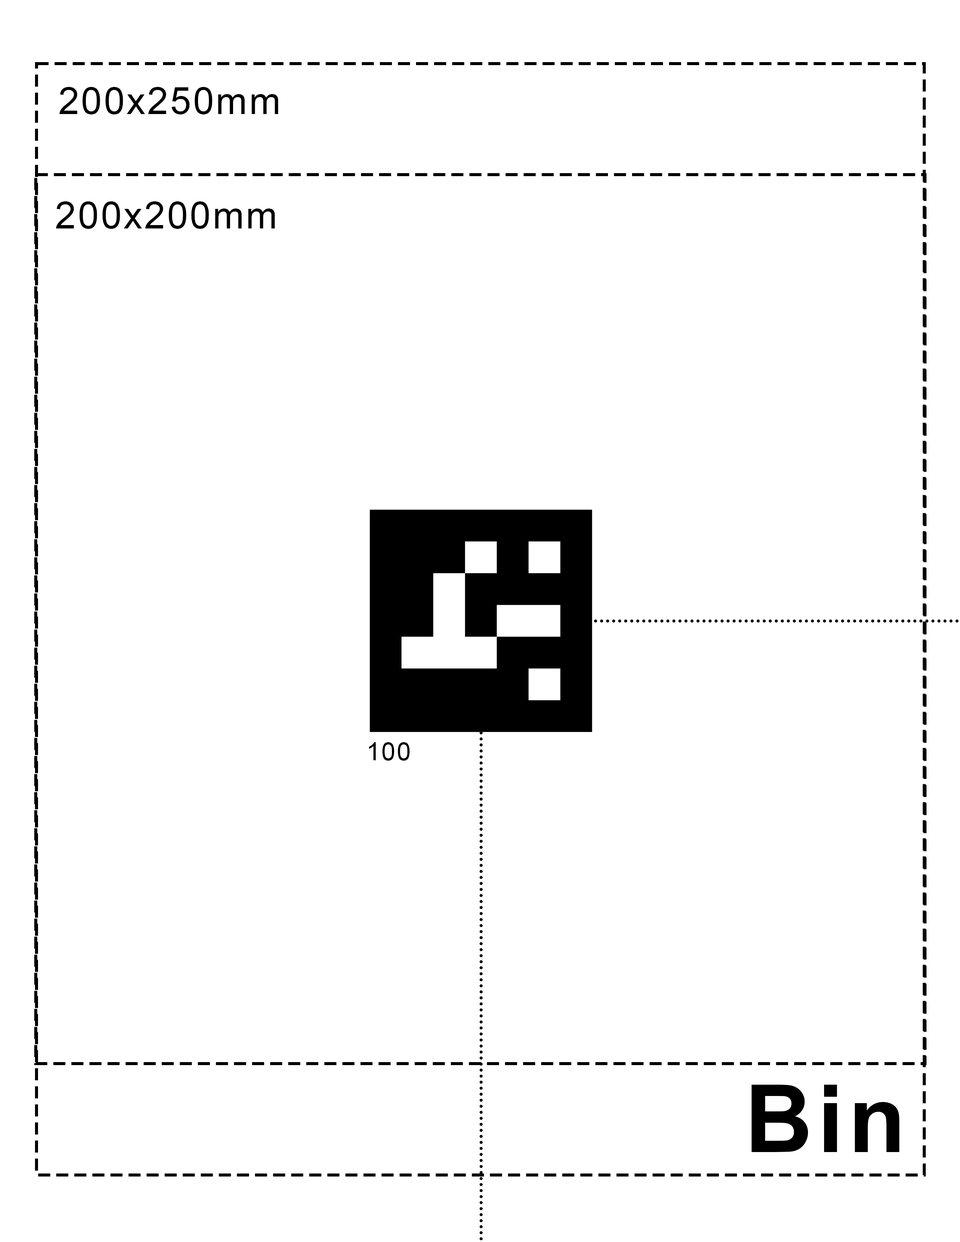
<style>
.page{position:relative;width:960px;height:1242px;background:#ffffff}
.page>*{position:absolute;margin:0}
.t1{font:37.6px "ArialMT";letter-spacing:0.05em;color:#000000}
.t2{font:25.1px "ArialMT";letter-spacing:0.05em;color:#000000}
.t3{font:94.1px "Arial-BoldMT";letter-spacing:0.05em;color:#000000}
</style>
<div class="page">
<p class="t1" style="left:59px;top:87px;width:219px;height:27px">200x250mm</p>
<p class="t1" style="left:56px;top:201px;width:219px;height:28px">200x200mm</p>
<p class="t2" style="left:369px;top:742px;width:41px;height:19px">100</p>
<p class="t3" style="left:751px;top:1085px;width:148px;height:67px">Bin</p>
</div>
